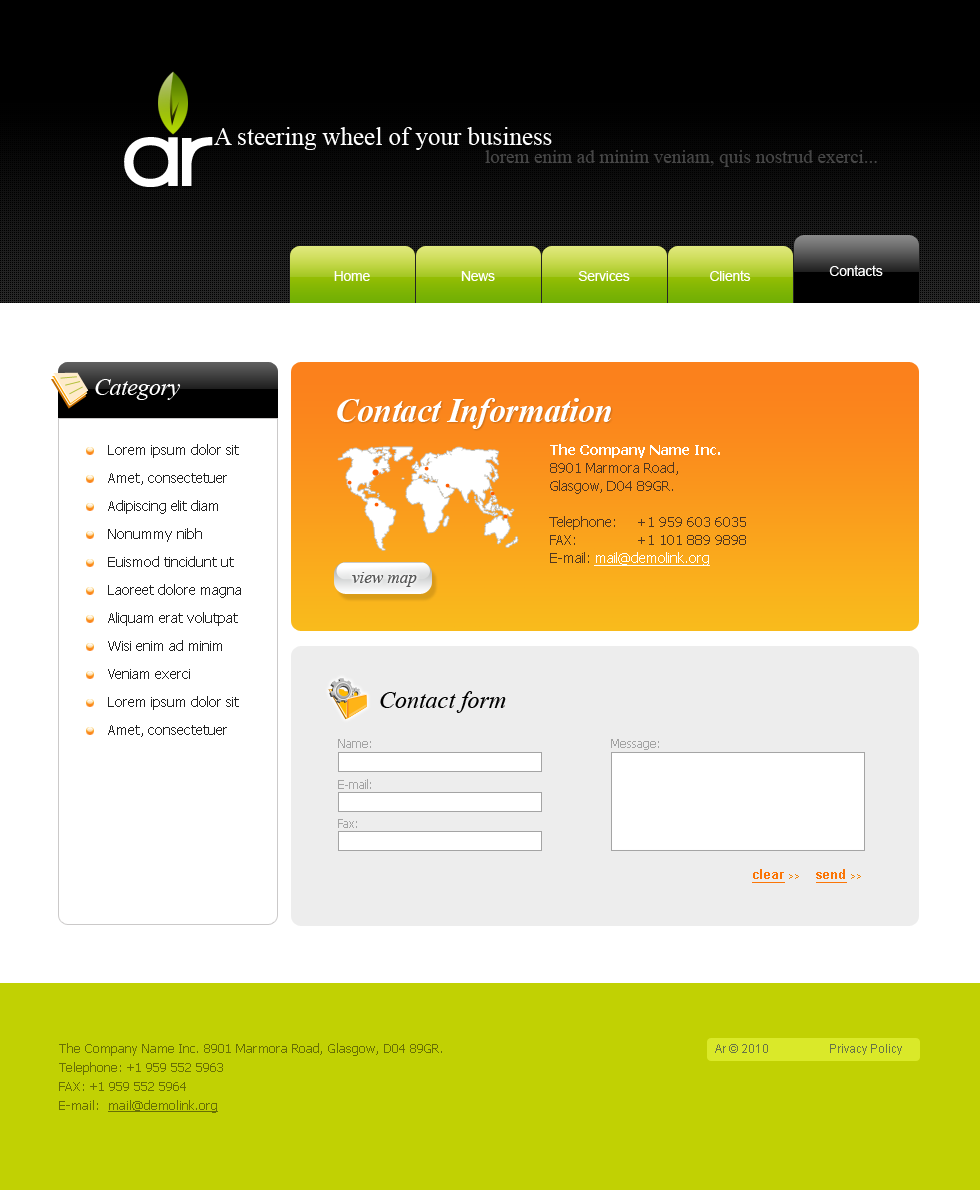
<style>
.page{position:relative;width:980px;height:1190px;background:#ffffff}
.page>*{position:absolute;margin:0}
.t1{font:98px "WalkwayBlack";color:#ffffff}
.t2{font:25px "TimesNewRomanPSMT";color:#ffffff}
.t3{font:19px "TimesNewRomanPSMT";color:#494949}
.t4{font:14px "ArialMT";letter-spacing:-0.02em;color:#ffffff}
.t5{font:24px "TimesNewRomanPS-ItalicMT";letter-spacing:-0.02em;color:#ffffff}
.t6{font:34px "TimesNewRomanPS-BoldItalicMT";letter-spacing:-0.02em;color:#ffffff}
.t7{font:14px/28px "Tahoma";color:#222222}
.t8{font:14px/18px "Tahoma";color:#503620}
.t9{font:14px/18px "Tahoma-Bold";color:#ffffff}
.t10{font:14px/18px "Tahoma";color:#ffffff;text-decoration:underline}
.t11{font:17px "TimesNewRomanPS-ItalicMT";color:#555656}
.t12{font:24px "TimesNewRomanPS-ItalicMT";color:#000000}
.t13{font:12px "Tahoma";color:#a4a4a4}
.t14{font:13px "Arial-BoldMT";color:#fb7506;text-decoration:underline}
.t15{font:8px "Tahoma";color:#f08508;text-transform:uppercase}
.t16{font:13px/19px "Tahoma";color:#687004}
.t17{font:13px/19px "Tahoma";color:#687004;text-decoration:underline}
.t18{font:12px "ArialMT";color:#697546}
</style>
<div class="page">
<p class="t1" style="left:124px;top:137px;width:89px;height:50px">ar</p>
<p class="t2" style="left:214px;top:127px;width:338px;height:23px">A steering wheel of your business</p>
<p class="t3" style="left:485px;top:150px;width:392px;height:17px">lorem enim ad minim veniam, quis nostrud exerci...</p>
<p class="t4" style="left:710px;top:270px;width:41px;height:11px">Clients</p>
<p class="t4" style="left:829px;top:265px;width:54px;height:11px">Contacts</p>
<p class="t4" style="left:334px;top:271px;width:36px;height:10px">Home</p>
<p class="t4" style="left:461px;top:271px;width:34px;height:10px">News</p>
<p class="t4" style="left:578px;top:271px;width:52px;height:10px">Services</p>
<p class="t5" style="left:95px;top:379px;width:86px;height:21px">Category</p>
<p class="t6" style="left:337px;top:398px;width:274px;height:31px">Contact Information</p>
<p class="t7" style="left:108px;top:444px;width:133px;height:293px">Lorem ipsum dolor sit <br>Amet, consectetuer <br>Adipiscing elit diam <br>Nonummy nibh <br>Euismod tincidunt ut <br>Laoreet dolore magna <br>Aliquam erat volutpat <br>Wisi enim ad minim <br>Veniam exerci<br>Lorem ipsum dolor sit <br>Amet, consectetuer</p>
<p class="t8" style="left:549px;top:444px;width:197px;height:122px"><span class="t9">The Company Name Inc.<br></span>8901 Marmora Road,<br>Glasgow, D04 89GR.<br> <br>Telephone:     +1 959 603 6035<br>FAX:               +1 101 889 9898<br>E-mail: <span class="t10">mail@demolink.org</span></p>
<p class="t11" style="left:352px;top:572px;width:65px;height:15px">view map</p>
<p class="t12" style="left:380px;top:691px;width:126px;height:22px">Contact form</p>
<p class="t13" style="left:338px;top:739px;width:33px;height:9px">Name:</p>
<p class="t13" style="left:611px;top:739px;width:48px;height:11px">Message:</p>
<p class="t13" style="left:338px;top:779px;width:33px;height:10px">E-mail:</p>
<p class="t13" style="left:338px;top:819px;width:19px;height:9px">Fax:</p>
<p class="t14" style="left:752px;top:869px;width:47px;height:14px">clear <span class="t15">&gt;&gt;</span></p>
<p class="t14" style="left:816px;top:869px;width:45px;height:14px">send <span class="t15">&gt;&gt;</span></p>
<p class="t16" style="left:59px;top:1043px;width:383px;height:70px">The Company Name Inc. 8901 Marmora Road, Glasgow, D04 89GR.<br>Telephone: +1 959 552 5963<br>FAX: +1 959 552 5964<br>E-mail:  <span class="t17">mail@demolink.org</span></p>
<p class="t18" style="left:715px;top:1044px;width:187px;height:11px">Ar © 2010                    Privacy Policy</p>
</div>
